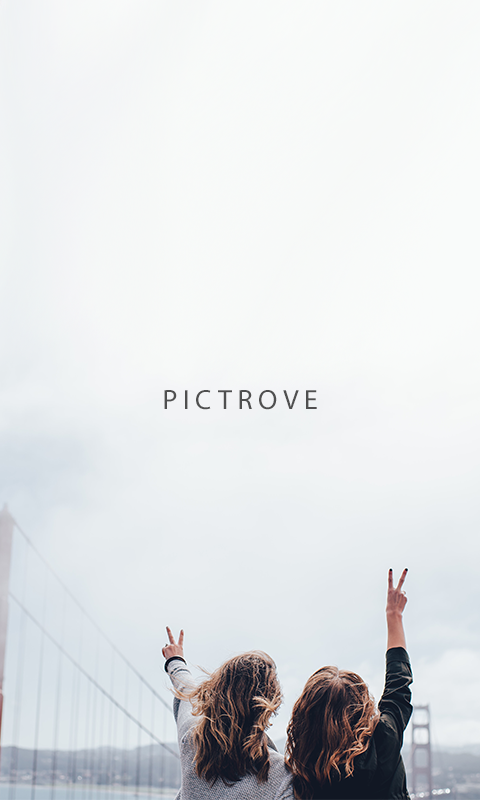
<style>
.page{position:relative;width:480px;height:800px}
.page>*{position:absolute;margin:0}
.t1{font:28px "MyriadPro-Regular";letter-spacing:0.2em;color:#4f4f4f;text-transform:uppercase}
</style>
<div class="page">
<p class="t1" style="left:164px;top:390px;width:153px;height:20px">Pictrove</p>
</div>
